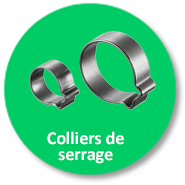
<style>
.page{position:relative;width:185px;height:185px;background:#00cc66}
.page>*{position:absolute;margin:0}
.t1{font:18px/16px "Calibri-Bold";color:#ffffff}
</style>
<div class="page">
<p class="t1" style="left:47px;top:131px;width:77px;height:33px;text-align:center">Colliers de   <br>serrage</p>
</div>
